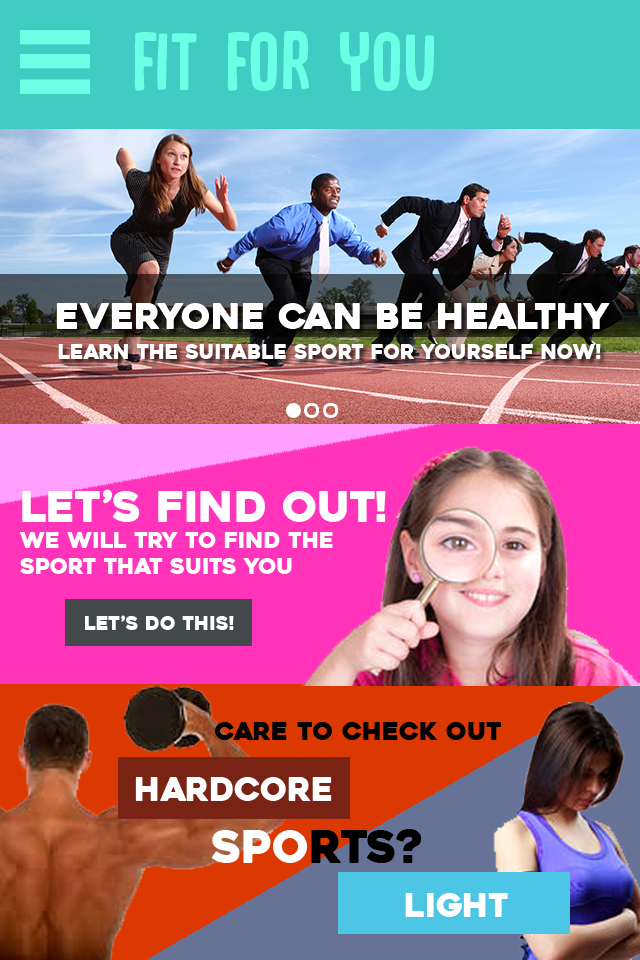
<style>
.page{position:relative;width:640px;height:960px}
.page>*{position:absolute;margin:0}
.t1{font:86.6px "DKCanoodle-Regular";color:#6bffe5}
.t2{font:35.8px "Heavitas";color:#ffffff}
.t3{font:20px "Heavitas";color:#ffffff}
.t4{font:42.6px "Heavitas";color:#ffffff}
.t5{font:21.8px "Heavitas";color:#ffffff}
.t6{font:19.1px "Heavitas";color:#ffffff}
.t7{font:25.4px "Heavitas";color:#000000}
.t8{font:32.7px "Heavitas";color:#ffffff}
</style>
<div class="page">
<p class="t1" style="left:134px;top:31px;width:301px;height:60px">fit for you</p>
<p class="t2" style="left:56px;top:303px;width:554px;height:26px">everyone can be healthy</p>
<p class="t3" style="left:58px;top:344px;width:543px;height:15px">learn the suitable sport for yourself NOW!</p>
<p class="t4" style="left:22px;top:489px;width:364px;height:33px">LET’S FIND OUT!</p>
<p class="t5" style="left:20px;top:532px;width:313px;height:42px">wE WILL TRY TO FIND THE <br>SPORT THAT SUITS YOU</p>
<p class="t6" style="left:85px;top:615px;width:149px;height:15px">let’s do this!</p>
<p class="t7" style="left:215px;top:722px;width:286px;height:18px">care to check out</p>
<p class="t8" style="left:135px;top:777px;width:197px;height:24px">hardcore</p>
<p class="t8" style="left:405px;top:893px;width:103px;height:24px">LIGHT</p>
</div>
